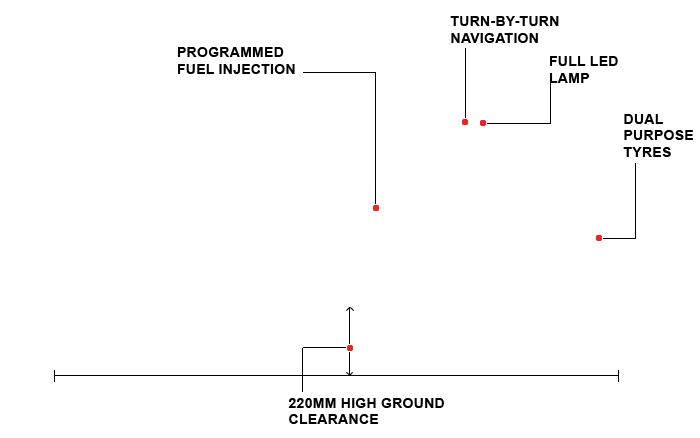
<style>
.page{position:relative;width:700px;height:438px;background:#ffffff}
.page>*{position:absolute;margin:0}
.t1{font:14px "Arial-BoldMT";letter-spacing:0.02em;color:#000000}
</style>
<div class="page">
<p class="t1" style="left:450px;top:16px;width:109px;height:27px">TURN-BY-TURN<br>NAVIGATION</p>
<p class="t1" style="left:177px;top:47px;width:118px;height:27px">PROGRAMMED<br>FUEL INJECTION</p>
<p class="t1" style="left:550px;top:56px;width:68px;height:27px">FULL LED <br>LAMP</p>
<p class="t1" style="left:623px;top:114px;width:70px;height:43px">DUAL<br>PURPOSE<br>TYRES</p>
<p class="t1" style="left:288px;top:398px;width:156px;height:26px">220MM HIGH GROUND<br>CLEARANCE</p>
</div>
